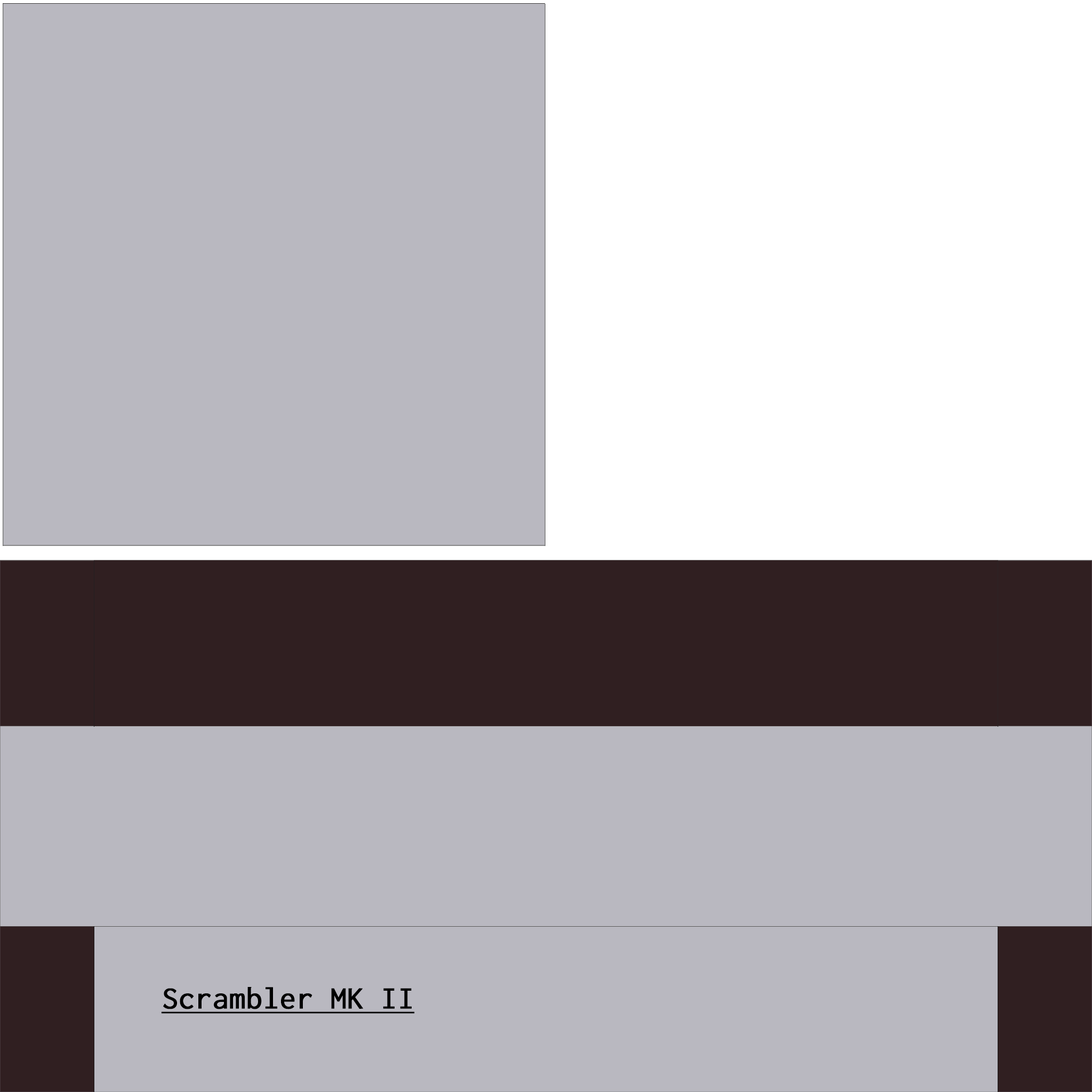
<style>
.page{position:relative;width:1092px;height:1092px;background:#b9b8c0}
.page>*{position:absolute;margin:0}
.t1{font:32px "Inconsolata";color:#000000;font-weight:bold;text-decoration:underline}
</style>
<div class="page">
<p class="t1" style="left:161px;top:987px;width:254px;height:27px">Scrambler MK II</p>
</div>
